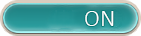
<style>
.page{position:relative;width:141px;height:36px}
.page>*{position:absolute;margin:0}
.t1{font:24px "Calibri-Light";color:#ffffff}
</style>
<div class="page">
<p class="t1" style="left:85px;top:11px;width:29px;height:15px">ON</p>
</div>
